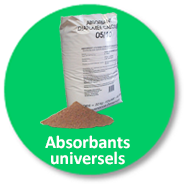
<style>
.page{position:relative;width:185px;height:185px;background:#00cc66}
.page>*{position:absolute;margin:0}
.t1{font:18px/16px "Calibri-Bold";color:#ffffff}
</style>
<div class="page">
<p class="t1" style="left:45px;top:135px;width:85px;height:30px;text-align:center">Absorbants<br>universels</p>
</div>
